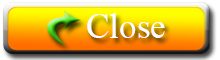
<style>
.page{position:relative;width:220px;height:60px}
.page>*{position:absolute;margin:0}
.t1{font:35px "TimesNewRomanPSMT";color:#ffffff}
</style>
<div class="page">
<p class="t1" style="left:87px;top:13px;width:78px;height:25px">Close</p>
</div>
